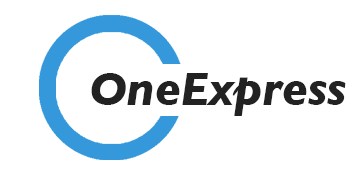
<style>
.page{position:relative;width:360px;height:174px;background:#ffffff}
.page>*{position:absolute;margin:0}
.t1{font:46.6px "GillSans-BoldItalic";color:#222222}
</style>
<div class="page">
<p class="t1" style="left:91px;top:73px;width:255px;height:43px">OneExpress</p>
</div>
